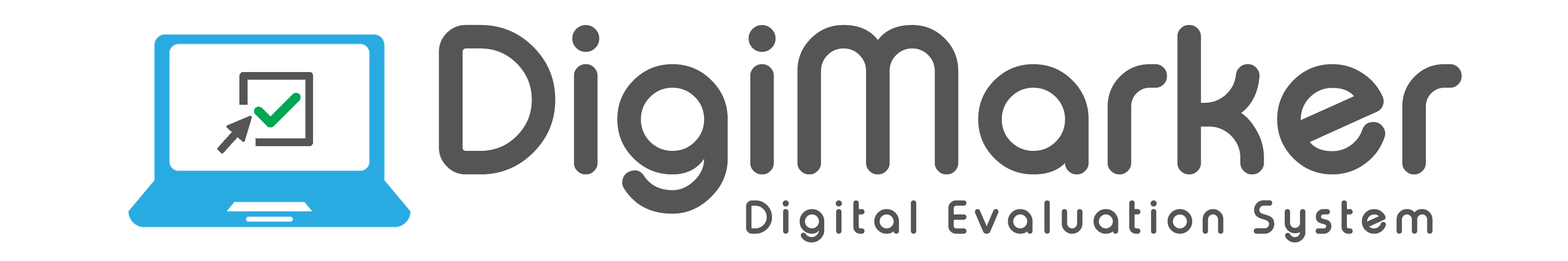
<style>
.page{position:relative;width:1568px;height:261px;background:#ffffff}
.page>*{position:absolute;margin:0}
.t1{font:196px "TypoRoundBoldDemo";color:#555555}
.t2{font:43.6px "TypoRoundBoldDemo";letter-spacing:0.16em;color:#555555}
</style>
<div class="page">
<p class="t1" style="left:439px;top:25px;width:1023px;height:189px">DigiMarker</p>
<p class="t2" style="left:746px;top:200px;width:687px;height:43px">Digital Evaluation System</p>
</div>
